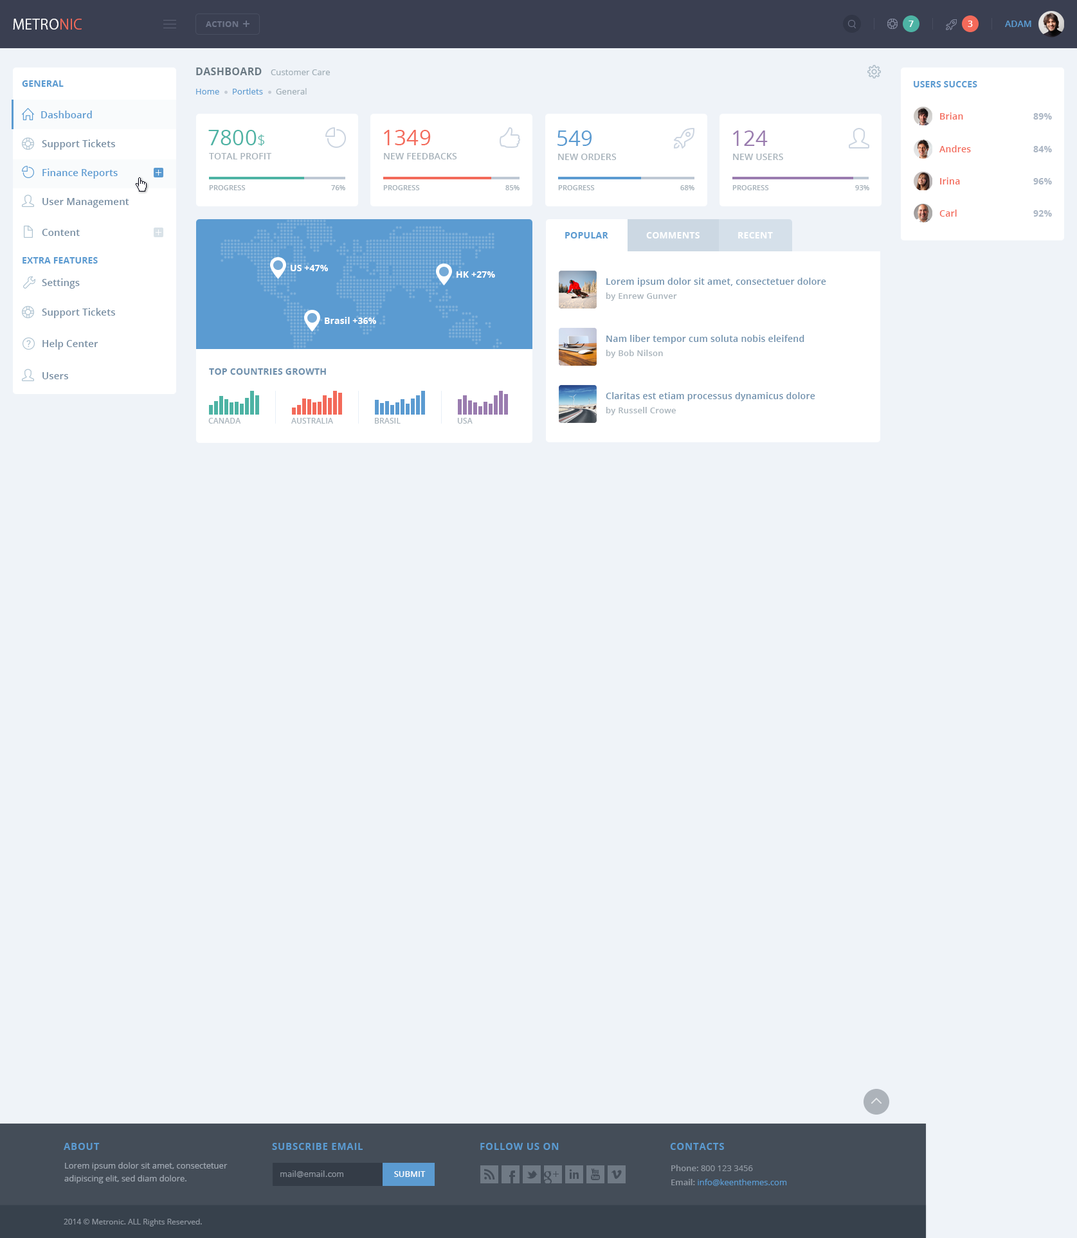
<style>
.page{position:relative;width:1077px;height:1238px;background:#eff3f8}
.page>*{position:absolute;margin:0}
.t1{font:14.1px "KozGoPro-Regular";letter-spacing:0.02em;color:#ffffff}
.t2{font:14.1px "KozGoPro-Regular";letter-spacing:0.02em;color:#f36a5a}
.t3{font:8.4px "OpenSans-Bold";letter-spacing:0.02em;color:#6d7488}
.t4{font:9px "OpenSans-Semibold";letter-spacing:0.01em;color:#ffffff}
.t5{font:9px "OpenSans-Semibold";color:#5b9bd1}
.t6{font:10.3px "OpenSans-Bold";letter-spacing:0.02em;color:#697882}
.t7{font:8.4px "OpenSans";letter-spacing:0.01em;color:#9eacb4}
.t8{font:9px "OpenSans-Bold";letter-spacing:0.01em;color:#5b9bd1}
.t9{font:8.4px "OpenSans";letter-spacing:0.01em;color:#5b9bd1}
.t10{font:9.6px "OpenSans-Semibold";letter-spacing:0.01em;color:#5b9bd1}
.t11{font:9px "OpenSans-Semibold";letter-spacing:0.02em;color:#f36a5a}
.t12{font:9px "OpenSans-Bold";letter-spacing:0.02em;color:#abb6c4}
.t13{font:21.2px "OpenSans";letter-spacing:0.01em;color:#4db3a4}
.t14{font:14.8px "OpenSans-Light";letter-spacing:0.01em;color:#4db3a4}
.t15{font:21.2px "OpenSans";letter-spacing:0.01em;color:#f36a5a}
.t16{font:21.2px "OpenSans";letter-spacing:0.01em;color:#5b9bd1}
.t17{font:21.2px "OpenSans";letter-spacing:0.01em;color:#9a7caf}
.t18{font:9.6px "OpenSans-Semibold";letter-spacing:0.01em;color:#768da2}
.t19{font:9px "OpenSans-Semibold";letter-spacing:0.01em;color:#a8b3bb}
.t20{font:7.1px "OpenSans-Semibold";letter-spacing:0.01em;color:#a8b3bb}
.t21{font:9px "OpenSans-Bold";letter-spacing:0.02em;color:#5b9bd1}
.t22{font:9px "OpenSans-Bold";letter-spacing:0.02em;color:#ffffff}
.t23{font:9px "OpenSans-Bold";letter-spacing:0.01em;color:#ffffff}
.t24{font:9px "OpenSans-Semibold";letter-spacing:0.02em;color:#6f90ad}
.t25{font:8.4px "OpenSans-Semibold";letter-spacing:0.02em;color:#a8b3bb}
.t26{font:9px "OpenSans-Bold";letter-spacing:0.02em;color:#6f90ad}
.t27{font:7.7px "OpenSans-Semibold";letter-spacing:0.01em;color:#a8b3bb}
.t28{font:9.6px "OpenSans-Bold";letter-spacing:0.05em;color:#5b9bd1}
.t29{font:8.4px/12.9px "OpenSans";color:#a1a9b3}
.t30{font:8.4px/14.1px "OpenSans";color:#5b9bd1}
.t31{font:8.4px/14.1px "OpenSans-Semibold";color:#8f97a1}
.t32{font:8.4px/14.1px "OpenSans";color:#8f97a1}
.t33{font:7.7px "Verdana";color:#8f97a1}
.t34{font:8.4px "OpenSans-Semibold";color:#fefefe}
.t35{font:7.7px "OpenSans";color:#8f97a1}
</style>
<div class="page">
<p class="t1" style="left:13px;top:19px;width:69px;height:11px">METRO<span class="t2">NIC</span></p>
<p class="t3" style="left:206px;top:21px;width:33px;height:6px">ACTION</p>
<p class="t4" style="left:908px;top:21px;width:6px;height:6px">7</p>
<p class="t4" style="left:968px;top:21px;width:5px;height:6px">3</p>
<p class="t5" style="left:1005px;top:21px;width:26px;height:6px">ADAM</p>
<p class="t6" style="left:196px;top:68px;width:66px;height:7px">DASHBOARD</p>
<p class="t7" style="left:271px;top:69px;width:59px;height:6px">Customer Care</p>
<p class="t8" style="left:22px;top:80px;width:42px;height:7px">GENERAL</p>
<p class="t9" style="left:196px;top:89px;width:23px;height:5px">Home</p>
<p class="t9" style="left:233px;top:88px;width:30px;height:6px">Portlets</p>
<p class="t7" style="left:276px;top:88px;width:31px;height:6px">General</p>
<p class="t8" style="left:914px;top:81px;width:63px;height:6px">USERS SUCCES</p>
<p class="t10" style="left:41px;top:111px;width:51px;height:7px">Dashboard</p>
<p class="t11" style="left:940px;top:113px;width:23px;height:7px">Brian</p>
<p class="t12" style="left:1033px;top:113px;width:19px;height:7px">89%</p>
<p class="t13" style="left:208px;top:130px;width:56px;height:16px">7800<span class="t14">$</span></p>
<p class="t15" style="left:384px;top:130px;width:47px;height:15px">1349</p>
<p class="t16" style="left:557px;top:130px;width:35px;height:16px">549</p>
<p class="t17" style="left:733px;top:130px;width:35px;height:16px">124</p>
<p class="t18" style="left:42px;top:140px;width:73px;height:10px">Support Tickets</p>
<p class="t11" style="left:939px;top:145px;width:32px;height:7px">Andres</p>
<p class="t12" style="left:1033px;top:146px;width:19px;height:6px">84%</p>
<p class="t19" style="left:209px;top:153px;width:63px;height:6px">TOTAL PROFIT</p>
<p class="t19" style="left:384px;top:153px;width:73px;height:6px">NEW FEEDBACKS</p>
<p class="t19" style="left:558px;top:154px;width:58px;height:6px">NEW ORDERS</p>
<p class="t19" style="left:733px;top:154px;width:50px;height:6px">NEW USERS</p>
<p class="t10" style="left:42px;top:168px;width:76px;height:11px">Finance Reports</p>
<p class="t20" style="left:209px;top:185px;width:37px;height:5px">PROGRESS</p>
<p class="t20" style="left:331px;top:185px;width:14px;height:5px">76%</p>
<p class="t20" style="left:383px;top:185px;width:37px;height:5px">PROGRESS</p>
<p class="t20" style="left:505px;top:185px;width:14px;height:5px">85%</p>
<p class="t20" style="left:558px;top:185px;width:37px;height:5px">PROGRESS</p>
<p class="t20" style="left:680px;top:185px;width:14px;height:5px">68%</p>
<p class="t20" style="left:732px;top:185px;width:37px;height:5px">PROGRESS</p>
<p class="t20" style="left:855px;top:185px;width:14px;height:5px">93%</p>
<p class="t11" style="left:940px;top:177px;width:20px;height:7px">Irina</p>
<p class="t12" style="left:1033px;top:178px;width:19px;height:6px">96%</p>
<p class="t18" style="left:42px;top:198px;width:87px;height:10px">User Management</p>
<p class="t11" style="left:939px;top:210px;width:18px;height:7px">Carl</p>
<p class="t12" style="left:1033px;top:210px;width:19px;height:7px">92%</p>
<p class="t18" style="left:42px;top:229px;width:38px;height:7px">Content</p>
<p class="t21" style="left:565px;top:232px;width:43px;height:7px">POPULAR</p>
<p class="t22" style="left:646px;top:232px;width:53px;height:7px">COMMENTS</p>
<p class="t22" style="left:738px;top:232px;width:35px;height:7px">RECENT</p>
<p class="t8" style="left:22px;top:257px;width:76px;height:7px">EXTRA FEATURES</p>
<p class="t23" style="left:291px;top:265px;width:37px;height:6px">US +47%</p>
<p class="t18" style="left:42px;top:278px;width:38px;height:11px">Settings</p>
<p class="t23" style="left:456px;top:271px;width:39px;height:7px">HK +27%</p>
<p class="t24" style="left:606px;top:278px;width:220px;height:9px">Lorem ipsum dolor sit amet, consectetuer dolore</p>
<p class="t25" style="left:606px;top:292px;width:71px;height:9px">by Enrew Gunver</p>
<p class="t18" style="left:42px;top:308px;width:73px;height:10px">Support Tickets</p>
<p class="t23" style="left:325px;top:317px;width:51px;height:7px">Brasil +36%</p>
<p class="t18" style="left:42px;top:339px;width:56px;height:11px">Help Center</p>
<p class="t24" style="left:606px;top:335px;width:198px;height:9px">Nam liber tempor cum soluta nobis eleifend</p>
<p class="t25" style="left:606px;top:350px;width:57px;height:8px">by Bob Nilson</p>
<p class="t18" style="left:42px;top:372px;width:26px;height:7px">Users</p>
<p class="t26" style="left:209px;top:368px;width:117px;height:7px">TOP COUNTRIES GROWTH</p>
<p class="t24" style="left:606px;top:392px;width:209px;height:9px">Claritas est etiam processus dynamicus dolore</p>
<p class="t25" style="left:606px;top:407px;width:70px;height:8px">by Russell Crowe</p>
<p class="t27" style="left:208px;top:418px;width:33px;height:6px">CANADA</p>
<p class="t27" style="left:291px;top:418px;width:42px;height:6px">AUSTRALIA</p>
<p class="t27" style="left:375px;top:418px;width:26px;height:6px">BRASIL</p>
<p class="t27" style="left:457px;top:418px;width:16px;height:6px">USA</p>
<p class="t28" style="left:64px;top:1143px;width:36px;height:7px">ABOUT</p>
<p class="t28" style="left:272px;top:1143px;width:91px;height:7px">SUBSCRIBE EMAIL</p>
<p class="t28" style="left:480px;top:1143px;width:79px;height:7px">FOLLOW US ON</p>
<p class="t28" style="left:670px;top:1143px;width:54px;height:7px">CONTACTS</p>
<p class="t29" style="left:64px;top:1162px;width:164px;height:22px">Lorem ipsum dolor sit amet, consectetuer <br>adipiscing elit, sed diam dolore.</p>
<p class="t30" style="left:671px;top:1165px;width:116px;height:21px"><span class="t31">Phone: </span><span class="t32">800 123 3456<br></span><span class="t31">Email: </span>info@keenthemes.com</p>
<p class="t33" style="left:280px;top:1171px;width:63px;height:7px">mail@email.com</p>
<p class="t34" style="left:394px;top:1171px;width:32px;height:6px">SUBMIT</p>
<p class="t35" style="left:64px;top:1219px;width:138px;height:8px">2014 © Metronic. ALL Rights Reserved.</p>
</div>
